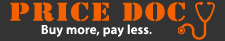
<style>
.page{position:relative;width:225px;height:41px;background:#333333}
.page>*{position:absolute;margin:0}
.t1{font:24px "StencilStd";letter-spacing:0.06em;color:#f36100;scale:1.2 1}
.t2{font:13px "MyriadPro-Semibold";letter-spacing:0.02em;color:#ffffff}
</style>
<div class="page">
<p class="t1" style="left:10px;top:2px;width:175px;height:20px">PRICE DOC</p>
<p class="t2" style="left:41px;top:24px;width:111px;height:13px">Buy more, pay less.</p>
</div>
